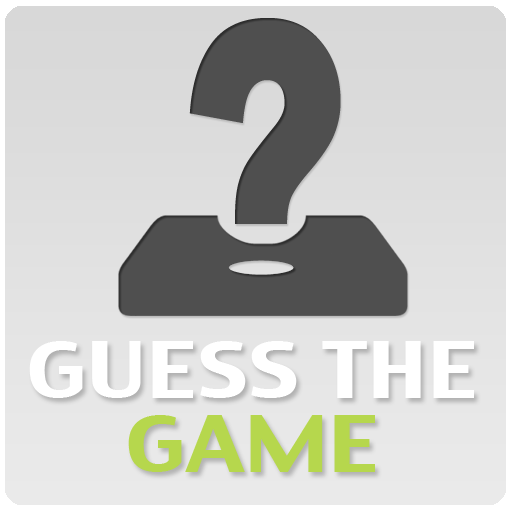
<style>
.page{position:relative;width:512px;height:512px}
.page>*{position:absolute;margin:0}
.t1{font:74.8px/74px "CharcoalCY";color:#ffffff;scale:1.19 1}
.t2{font:74.8px/74px "CharcoalCY";color:#b6d74d;scale:1.19 1}
</style>
<div class="page">
<p class="t1" style="left:29px;top:341px;width:445px;height:131px;text-align:center">GUESS THE<br><span class="t2">GAME</span></p>
</div>
